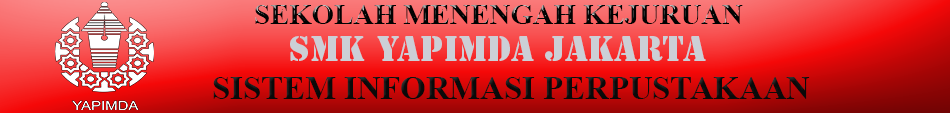
<style>
.page{position:relative;width:950px;height:113px}
.page>*{position:absolute;margin:0}
.t1{font:28.7px "TimesNewRomanPS-BoldMT";color:#080808}
.t2{font:32.7px "StencilStd";color:#cccfd6}
.t3{font:32.7px "TimesNewRomanPS-BoldMT";color:#0a0a0a}
</style>
<div class="page">
<p class="t1" style="left:255px;top:5px;width:488px;height:19px">SEKOLAH MENENGAH KEJURUAN</p>
<p class="t2" style="left:290px;top:36px;width:416px;height:25px">SMK YAPIMDA JAKARTA</p>
<p class="t3" style="left:213px;top:77px;width:597px;height:22px">SISTEM INFORMASI PERPUSTAKAAN</p>
</div>
